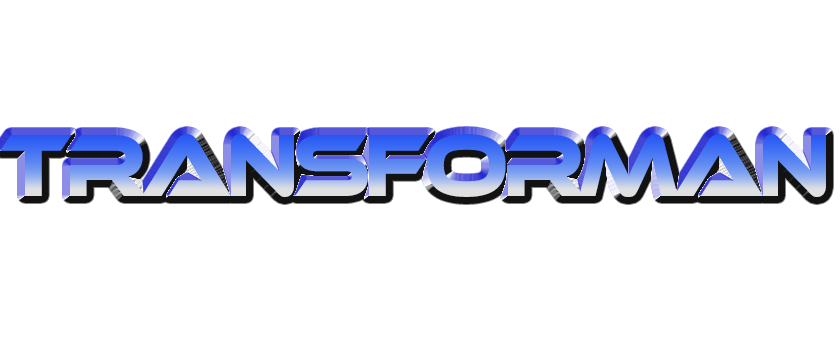
<style>
.page{position:relative;width:840px;height:360px;background:#ffffff}
.page>*{position:absolute;margin:0}
.t1{font:91.2px "EthnocentricRg-Regular";letter-spacing:-0.075em;scale:0.88 1}
</style>
<div class="page">
<p class="t1" style="left:0px;top:134px;width:826px;height:63px">TRANSFORMAN</p>
</div>
